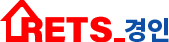
<style>
.page{position:relative;width:169px;height:42px;background:#ffffff}
.page>*{position:absolute;margin:0}
.t1{font:36px "AcuminConcept-Black";color:#fe0000}
.t2{font:26px "NotoSansKR-Black";color:#0d4fa6}
</style>
<div class="page">
<p class="t1" style="left:21px;top:16px;width:91px;height:27px">RETS</p>
<p class="t2" style="left:124px;top:18px;width:45px;height:24px">경인</p>
</div>
